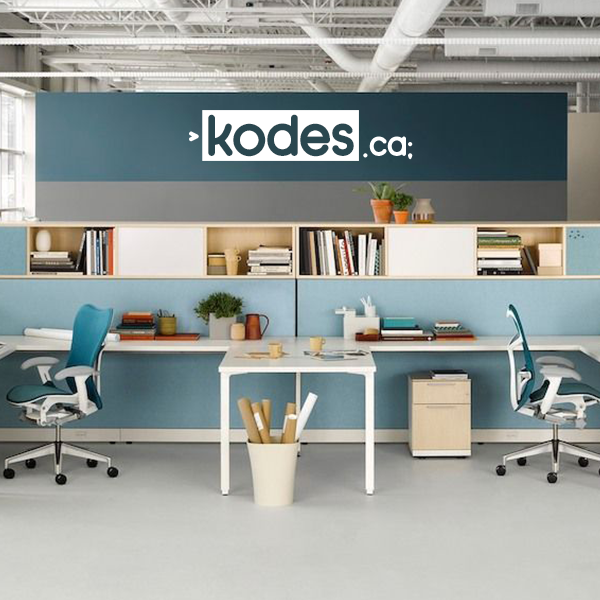
<style>
.page{position:relative;width:600px;height:600px}
.page>*{position:absolute;margin:0}
.t1{font:58.8px "Moon2.0-Bold";color:#2a474f}
.t2{font:35.3px "Moon2.0-Bold";color:#ffffff}
</style>
<div class="page">
<p class="t1" style="left:208px;top:114px;width:146px;height:43px">kodes</p>
<p class="t2" style="left:189px;top:131px;width:10px;height:11px">&gt;</p>
<p class="t2" style="left:363px;top:136px;width:50px;height:24px">.ca;</p>
</div>
